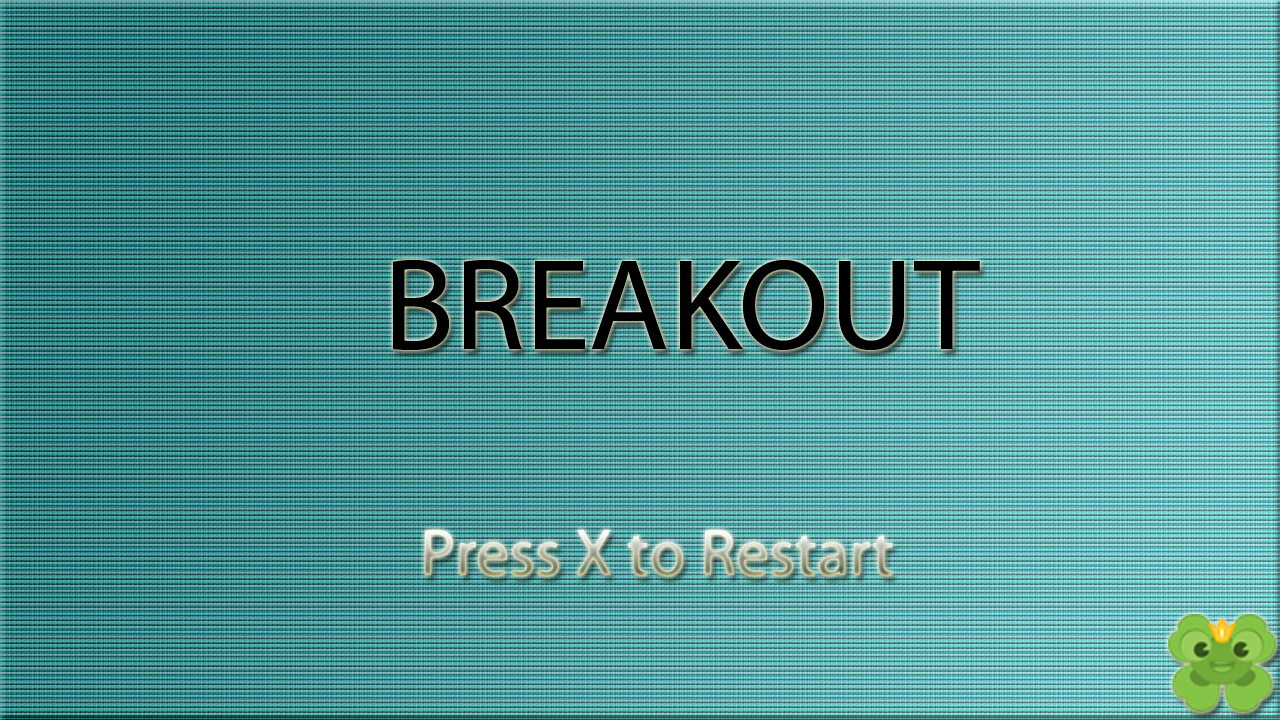
<style>
.page{position:relative;width:1280px;height:720px}
.page>*{position:absolute;margin:0}
.t1{font:131.2px "MyriadPro-Regular";color:#000000}
.t2{font:66.4px "MyriadPro-Regular"}
</style>
<div class="page">
<p class="t1" style="left:393px;top:260px;width:587px;height:90px">BREAKOUT</p>
<p class="t2" style="left:425px;top:530px;width:468px;height:46px">Press X to Restart</p>
</div>
